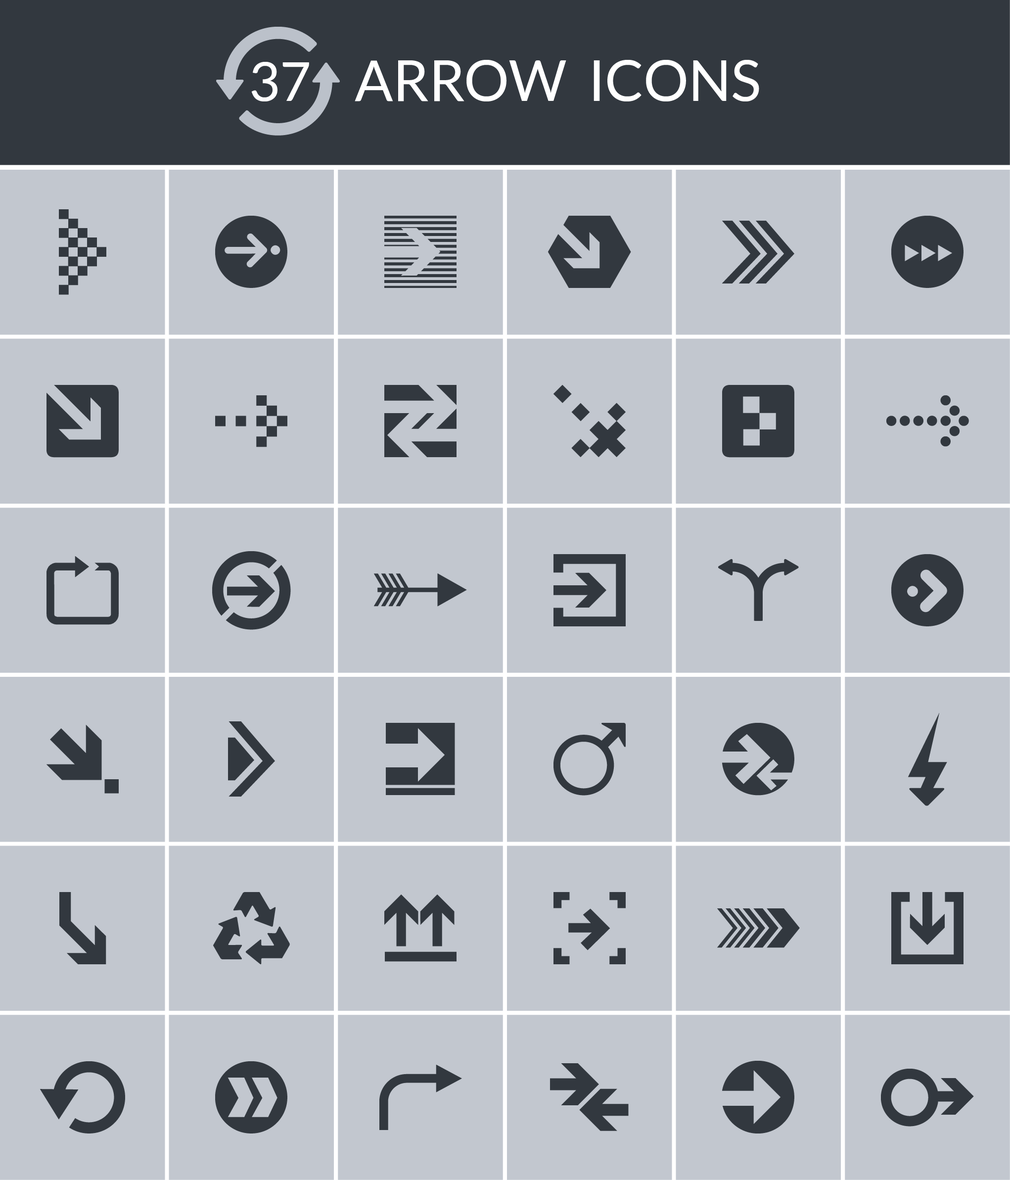
<style>
.page{position:relative;width:1010px;height:1180px;background:#c2c7cf}
.page>*{position:absolute;margin:0}
.t1{font:56.3px "Lato-Regular";color:#ffffff}
.t2{font:53.6px "Lato-Regular";color:#ffffff}
</style>
<div class="page">
<p class="t1" style="left:251px;top:60px;width:509px;height:41px"><span class="t2">37</span>    ARROW  ICONS</p>
</div>
